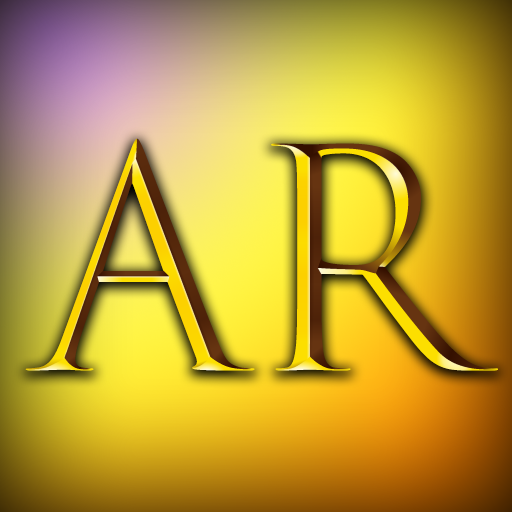
<style>
.page{position:relative;width:512px;height:512px}
.page>*{position:absolute;margin:0}
.t1{font:300px "TrajanColor-Concept"}
</style>
<div class="page">
<p class="t1" style="left:25px;top:138px;width:473px;height:233px">Ar</p>
</div>
